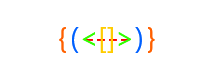
<style>
.page{position:relative;width:214px;height:80px;background:#ffffff}
.page>*{position:absolute;margin:0}
.t1{font:29px "SegoeUI";color:#ff6000}
.t2{font:29px "SegoeUI";color:#0060ff}
.t3{font:29px "SegoeUI";color:#ffcc00}
.t4{font:29px "SegoeUI";color:#30ff00}
.t5{font:29px "SegoeUI"}
</style>
<div class="page">
<p class="t1" style="left:59px;top:27px;width:96px;height:26px">{          }</p>
<p class="t2" style="left:72px;top:27px;width:70px;height:26px">(       )</p>
<p class="t3" style="left:100px;top:27px;width:13px;height:26px">[]</p>
<p class="t4" style="left:82px;top:32px;width:49px;height:14px">&lt;  &gt;</p>
<p class="t5" style="left:85px;top:39px;width:44px;height:2px">----</p>
</div>
